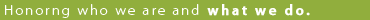
<style>
.page{position:relative;width:370px;height:20px;background:#91ae3d}
.page>*{position:absolute;margin:0}
.t1{font:14.6px "MyriadPro-Light";letter-spacing:0.15em;color:#ffffff}
.t2{font:14.6px "MyriadPro-Semibold";letter-spacing:0.15em;color:#ffffff;font-weight:bold}
</style>
<div class="page">
<p class="t1" style="left:5px;top:4px;width:305px;height:14px">Honorng who we are and <span class="t2">what we do.</span></p>
</div>
